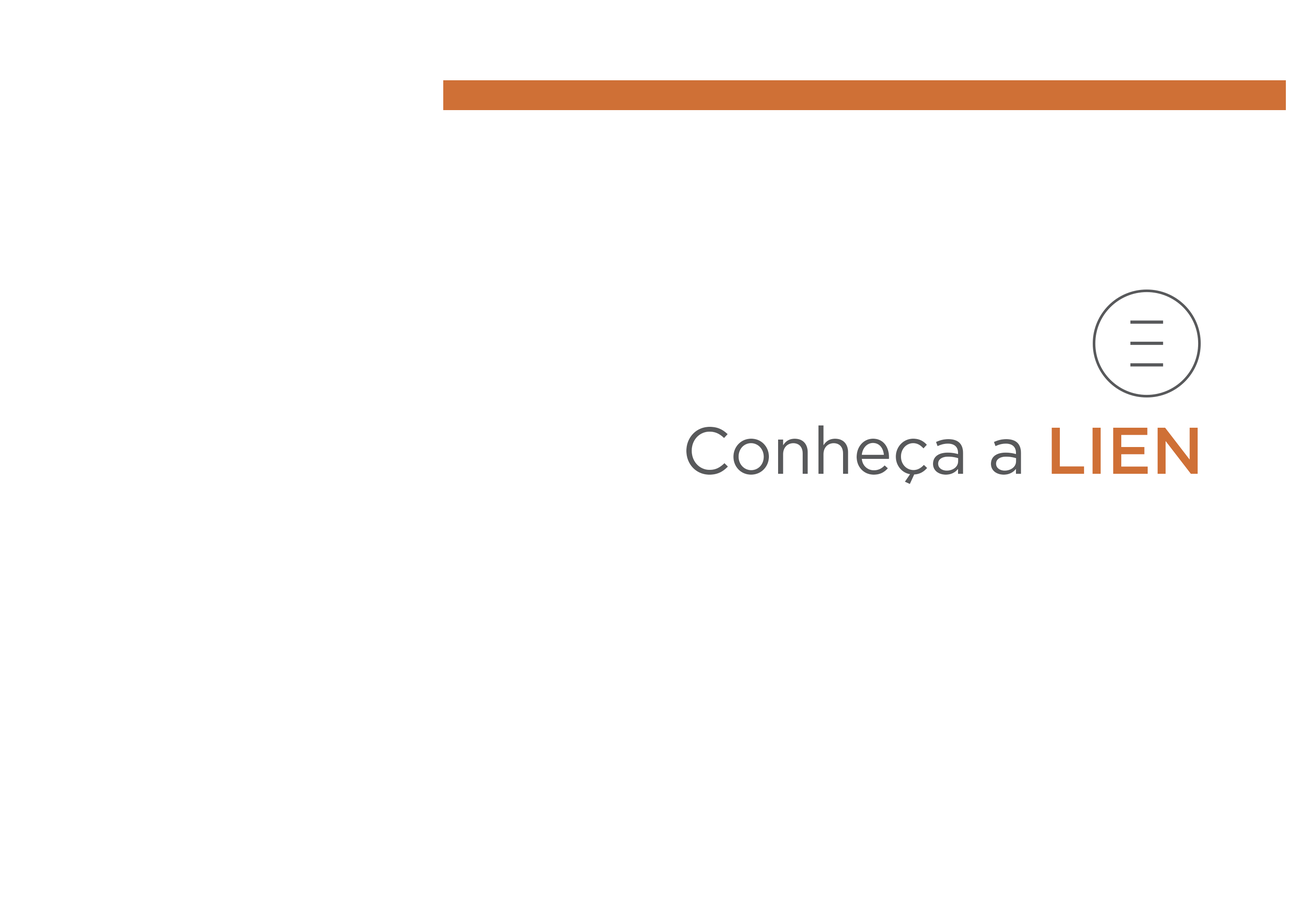
<style>
.page{position:relative;width:1292px;height:923px;background:#ffffff}
.page>*{position:absolute;margin:0}
.t1{font:65.8px "Gotham-Book";color:#58595b}
.t2{font:65.8px "Gotham-Medium";color:#cf7036}
</style>
<div class="page">
<p class="t1" style="left:686px;top:425px;width:511px;height:59px">Conheça a <span class="t2">LIEN</span></p>
</div>
